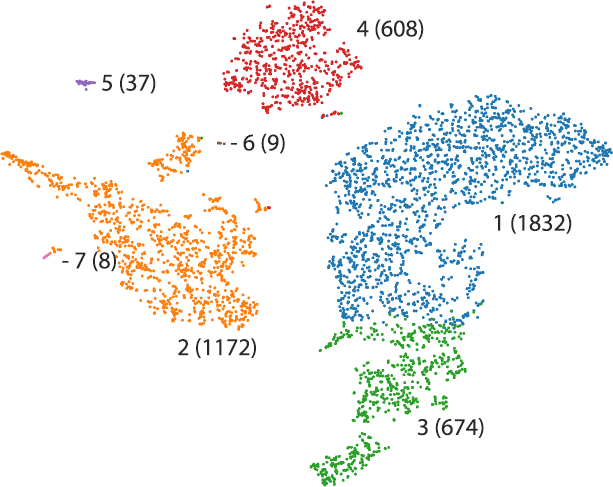
<style>
.page{position:relative;width:613px;height:487px;background:#ffffff}
.page>*{position:absolute;margin:0}
.t1{font:24px "MyriadPro-Regular";color:#282828}
</style>
<div class="page">
<p class="t1" style="left:357px;top:19px;width:67px;height:21px">4 (608)</p>
<p class="t1" style="left:102px;top:73px;width:54px;height:21px">5 (37)</p>
<p class="t1" style="left:231px;top:133px;width:54px;height:21px">- 6 (9)</p>
<p class="t1" style="left:494px;top:214px;width:78px;height:20px">1 (1832)</p>
<p class="t1" style="left:62px;top:251px;width:54px;height:21px">- 7 (8)</p>
<p class="t1" style="left:178px;top:338px;width:78px;height:20px">2 (1172)</p>
<p class="t1" style="left:417px;top:418px;width:67px;height:20px">3 (674)</p>
</div>
